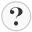
<style>
.page{position:relative;width:32px;height:32px;background:#f9f9f9}
.page>*{position:absolute;margin:0}
.t1{font:26.1px "EngraversMT";color:#333333}
</style>
<div class="page">
<p class="t1" style="left:10px;top:7px;width:13px;height:19px">?</p>
</div>
